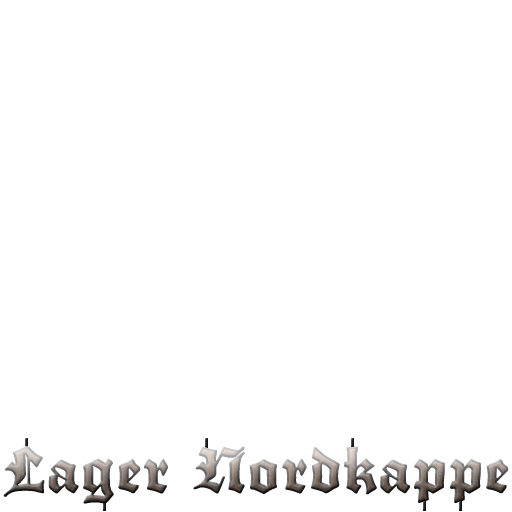
<style>
.page{position:relative;width:512px;height:512px;background:#ffffff}
.page>*{position:absolute;margin:0}
.t1{font:58px "FetteTrump-Deutsch";font-weight:bold}
</style>
<div class="page">
<p class="t1" style="left:3px;top:446px;width:506px;height:58px">Lager Nordkappe</p>
<p class="t1" style="left:3px;top:446px;width:506px;height:58px">Lager Nordkappe</p>
</div>
